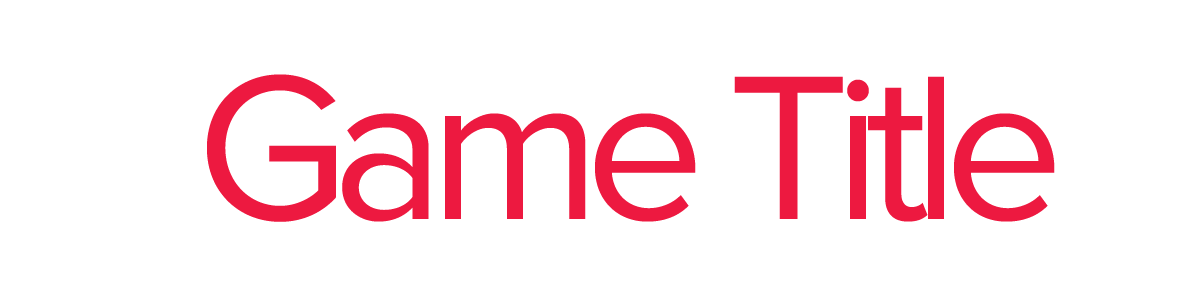
<style>
.page{position:relative;width:1200px;height:300px;background:#ffffff}
.page>*{position:absolute;margin:0}
.t1{font:213.3px "ProximaNova-Regular";letter-spacing:-0.075em;color:#ed1940}
</style>
<div class="page">
<p class="t1" style="left:207px;top:74px;width:848px;height:148px">Game Title</p>
</div>
